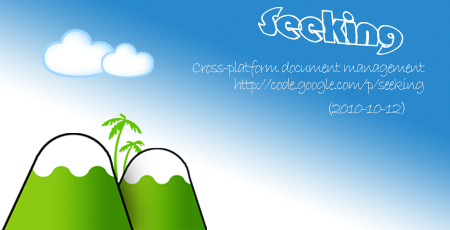
<style>
.page{position:relative;width:450px;height:230px}
.page>*{position:absolute;margin:0}
.t1{font:37.5px "STCaiyun";letter-spacing:-0.075em;color:#f9fdfa;scale:1.04 1}
.t2{font:16.7px "BradleyHandITC";letter-spacing:-0.075em;color:#edece8}
.t3{font:16.7px "BradleyHandITC";letter-spacing:-0.075em}
</style>
<div class="page">
<p class="t1" style="left:258px;top:7px;width:146px;height:48px;rotate:6deg">Seeking</p>
<p class="t2" style="left:192px;top:60px;width:233px;height:18px">Cross-platform document management</p>
<p class="t2" style="left:234px;top:78px;width:190px;height:17px">http://code.google.com/p/seeking</p>
<p class="t3" style="left:329px;top:101px;width:76px;height:15px">(2010-10-12)</p>
</div>
